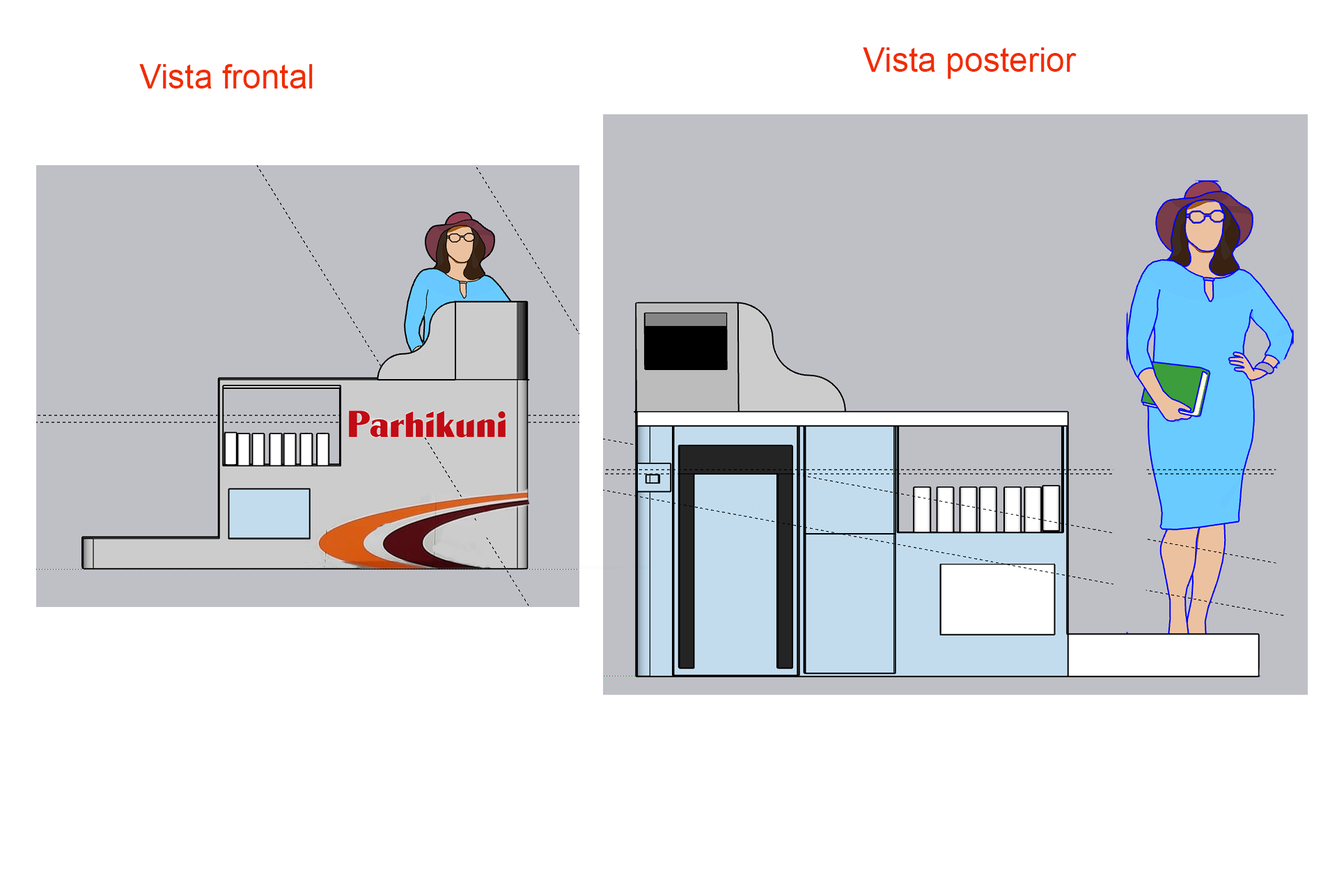
<style>
.page{position:relative;width:1337px;height:892px;background:#ffffff}
.page>*{position:absolute;margin:0}
.t1{font:33.4px "ArialMT";color:#f02d00}
</style>
<div class="page">
<p class="t1" style="left:863px;top:47px;width:214px;height:32px">Vista posterior</p>
<p class="t1" style="left:139px;top:64px;width:174px;height:24px">Vista frontal</p>
</div>
